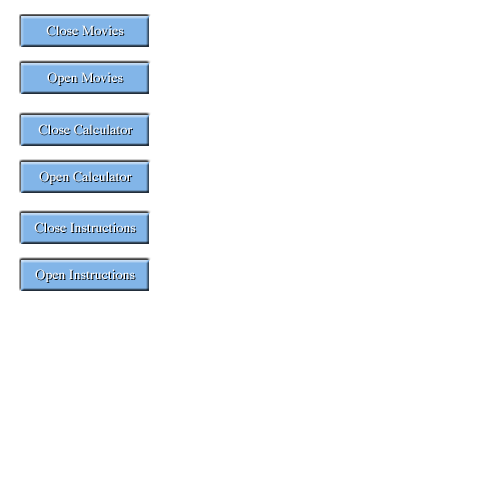
<style>
.page{position:relative;width:500px;height:500px;background:#ffffff}
.page>*{position:absolute;margin:0}
.t1{font:14px "Times-Roman";color:#ffffff}
.t2{font:14px "Times-Roman"}
</style>
<div class="page">
<p class="t1" style="left:46px;top:25px;width:78px;height:11px">Close Movies</p>
<p class="t2" style="left:47px;top:26px;width:78px;height:11px">Close Movies</p>
<p class="t1" style="left:47px;top:72px;width:76px;height:13px">Open Movies</p>
<p class="t2" style="left:48px;top:73px;width:76px;height:13px">Open Movies</p>
<p class="t1" style="left:38px;top:124px;width:94px;height:11px">Close Calculator</p>
<p class="t2" style="left:39px;top:125px;width:94px;height:11px">Close Calculator</p>
<p class="t1" style="left:39px;top:171px;width:93px;height:13px">Open Calculator</p>
<p class="t2" style="left:40px;top:172px;width:93px;height:13px">Open Calculator</p>
<p class="t1" style="left:34px;top:222px;width:102px;height:11px">Close Instructions</p>
<p class="t2" style="left:35px;top:223px;width:102px;height:11px">Close Instructions</p>
<p class="t1" style="left:35px;top:269px;width:100px;height:13px">Open Instructions</p>
<p class="t2" style="left:36px;top:270px;width:100px;height:13px">Open Instructions</p>
</div>
